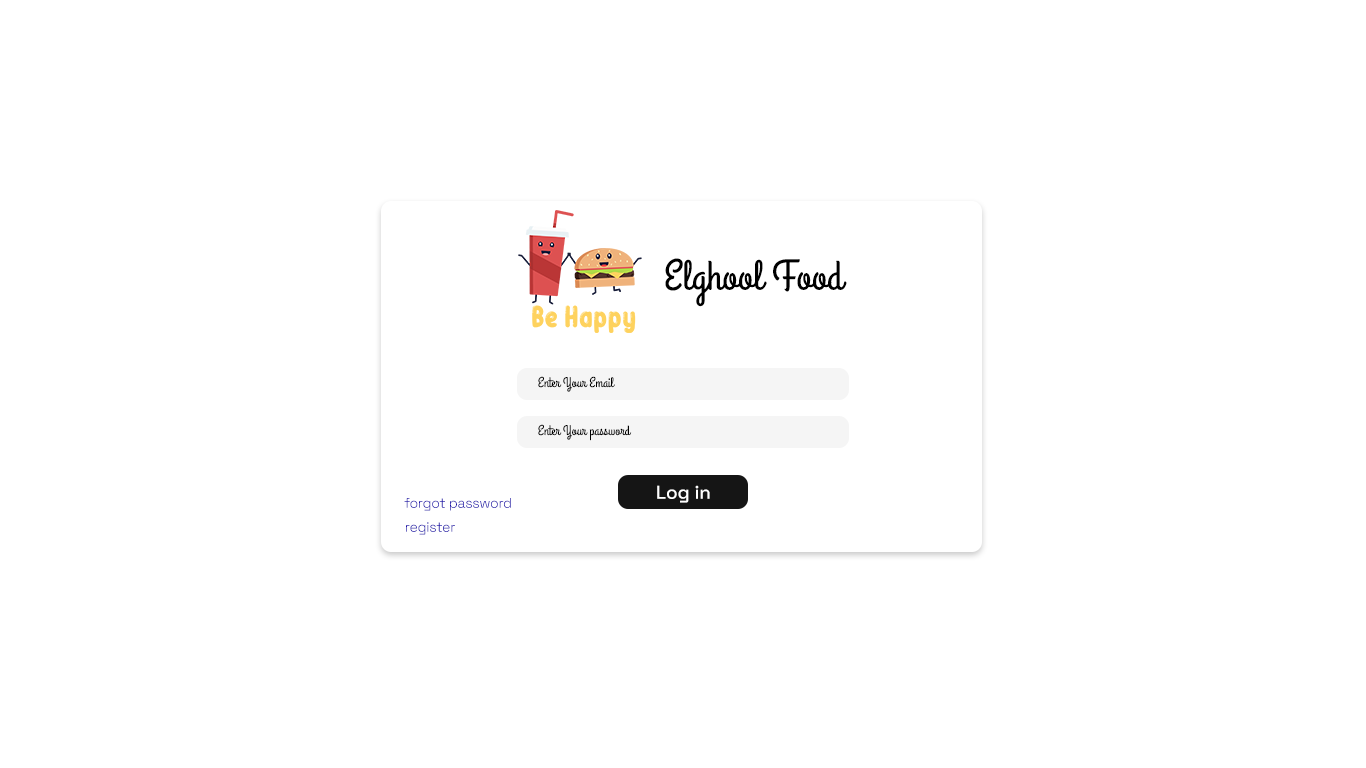
<style>
.page{position:relative;width:1366px;height:768px;background:#ffffff}
.page>*{position:absolute;margin:0}
.t1{font:42.3px "GrandHotel-Regular";color:#000000}
.t2{font:14px "GrandHotel-Regular";color:#000000}
.t3{font:18.5px "SpaceGrotesk-Medium";color:#ffffff}
.t4{font:14px "SpaceGrotesk-Light";letter-spacing:-0.02em;color:#1a0dab}
</style>
<div class="page">
<p class="t1" style="left:665px;top:258px;width:182px;height:49px">Elghool Food</p>
<p class="t2" style="left:538px;top:376px;width:77px;height:16px">Enter Your Email</p>
<p class="t2" style="left:538px;top:424px;width:94px;height:17px">Enter Your password</p>
<p class="t3" style="left:657px;top:485px;width:53px;height:18px">Log in</p>
<p class="t4" style="left:404px;top:498px;width:107px;height:13px">forgot password</p>
<p class="t4" style="left:406px;top:522px;width:49px;height:13px">register</p>
</div>
